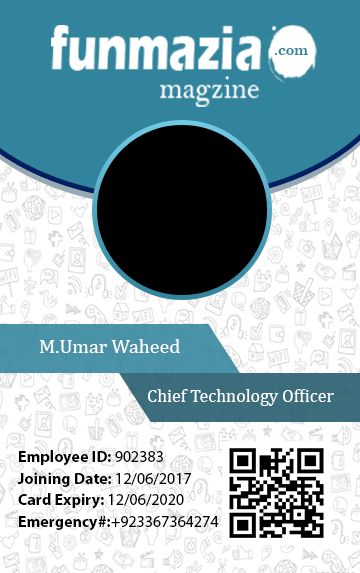
<style>
.page{position:relative;width:360px;height:573px;background:#ffffff}
.page>*{position:absolute;margin:0}
.t1{font:14px "CenturySchoolbook-Bold";color:#32849c}
.t2{font:20px "Cambria";color:#ffffff}
.t3{font:18px "Cambria";color:#ffffff}
.t4{font:16px "MyriadPro-Bold";color:#000000}
.t5{font:16px "MyriadPro-Regular";color:#000000}
</style>
<div class="page">
<p class="t1" style="left:274px;top:48px;width:34px;height:7px">.com</p>
<p class="t2" style="left:40px;top:339px;width:140px;height:14px">M.Umar Waheed</p>
<p class="t3" style="left:148px;top:389px;width:186px;height:17px">Chief Technology Officer</p>
<p class="t4" style="left:17px;top:450px;width:202px;height:81px">Employee ID: <span class="t5">902383<br> <br><br></span>Joining Date: <span class="t5">12/06/2017<br><br><br></span>Card Expiry: <span class="t5">12/06/2020<br><br><br></span>Emergency#:<span class="t5">+923367364274</span></p>
</div>
